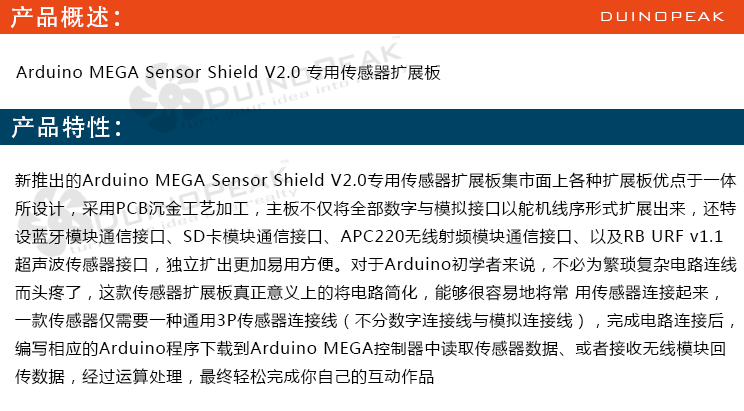
<style>
.page{position:relative;width:744px;height:411px;background:#ffffff}
.page>*{position:absolute;margin:0}
.t1{font:24px "AdobeHeitiStd-Regular";letter-spacing:0.05em;color:#ffffff}
.t2{font:18px "BankGothicBT-Light";letter-spacing:0.05em;color:#ffffff}
.t3{font:16px "MicrosoftYaHei";letter-spacing:0.05em;color:#000000}
</style>
<div class="page">
<p class="t1" style="left:10px;top:6px;width:109px;height:23px">产品概述：</p>
<p class="t2" style="left:601px;top:12px;width:124px;height:9px">DUINOPEAK</p>
<p class="t3" style="left:16px;top:64px;width:425px;height:16px">​Arduino MEGA Sensor Shield V2.0 专用传感器扩展板</p>
<p class="t1" style="left:11px;top:115px;width:109px;height:24px">产品特性：</p>
<p class="t3" style="left:15px;top:172px;width:722px;height:213px">新推出的Arduino MEGA Sensor Shield V2.0专用传感器扩展板集市面上各种扩展板优点于一体<br>所设计，采用PCB沉金工艺加工，主板不仅将全部数字与模拟接口以舵机线序形式扩展出来，还特<br>设蓝牙模块通信接口、SD卡模块通信接口、APC220无线射频模块通信接口、以及RB URF v1.1<br>超声波传感器接口，独立扩出更加易用方便。对于Arduino初学者来说，不必为繁琐复杂电路连线<br>而头疼了，这款传感器扩展板真正意义上的将电路简化，能够很容易地将常 用传感器连接起来，<br>一款传感器仅需要一种通用3P传感器连接线（不分数字连接线与模拟连接线），完成电路连接后，<br>编写相应的Arduino程序下载到Arduino MEGA控制器中读取传感器数据、或者接收无线模块回<br>传数据，经过运算处理，最终轻松完成你自己的互动作品</p>
</div>
